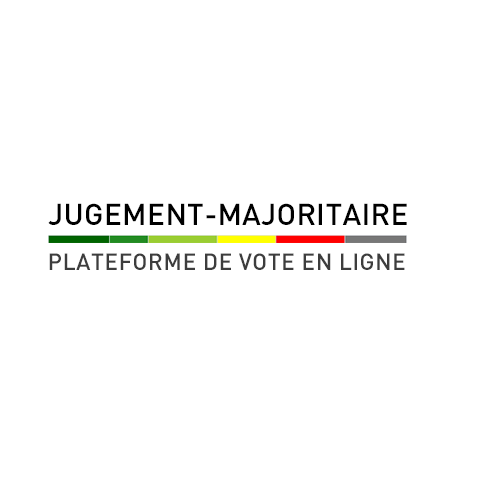
<style>
.page{position:relative;width:500px;height:500px;background:#ffffff}
.page>*{position:absolute;margin:0}
.t1{font:30px "DIN-Medium";letter-spacing:0.01em;color:#000000;text-transform:uppercase}
.t2{font:23px "DIN-Medium";letter-spacing:0.02em;color:#3d3d3d;text-transform:uppercase}
</style>
<div class="page">
<p class="t1" style="left:48px;top:203px;width:359px;height:22px">JUGEMENT-MAJORITAIRE</p>
<p class="t2" style="left:49px;top:253px;width:356px;height:17px">Plateforme de vote en ligne</p>
</div>
